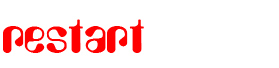
<style>
.page{position:relative;width:279px;height:68px;background:#ffffff}
.page>*{position:absolute;margin:0}
.t1{font:48px "Asimov";color:#ff0000}
</style>
<div class="page">
<p class="t1" style="left:3px;top:19px;width:141px;height:34px">restart</p>
</div>
